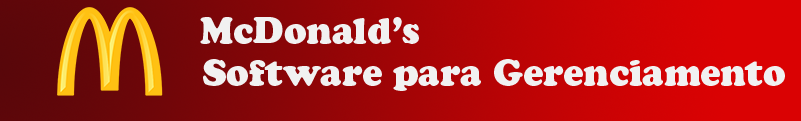
<style>
.page{position:relative;width:801px;height:121px}
.page>*{position:absolute;margin:0}
.t1{font:36px "CooperBlackStd";color:#f1f1f1}
</style>
<div class="page">
<p class="t1" style="left:200px;top:17px;width:219px;height:27px">McDonald’s</p>
<p class="t1" style="left:203px;top:59px;width:582px;height:32px">Software para Gerenciamento</p>
</div>
